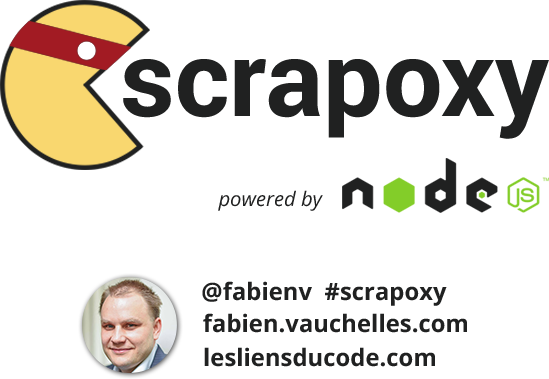
<style>
.page{position:relative;width:549px;height:379px;background:#ffffff}
.page>*{position:absolute;margin:0}
.t1{font:105.7px "Roboto-Bold";color:#202121}
.t2{font:20.1px "OpenSans-Italic";color:#202121}
.t3{font:24px "OpenSans-Bold";color:#202121}
</style>
<div class="page">
<p class="t1" style="left:123px;top:59px;width:426px;height:80px">scrapoxy</p>
<p class="t2" style="left:218px;top:190px;width:105px;height:21px">powered by</p>
<p class="t3" style="left:202px;top:281px;width:245px;height:25px">@fabienv  #scrapoxy</p>
<p class="t3" style="left:203px;top:313px;width:264px;height:20px">fabien.vauchelles.com</p>
<p class="t3" style="left:204px;top:347px;width:231px;height:20px">lesliensducode.com</p>
</div>
